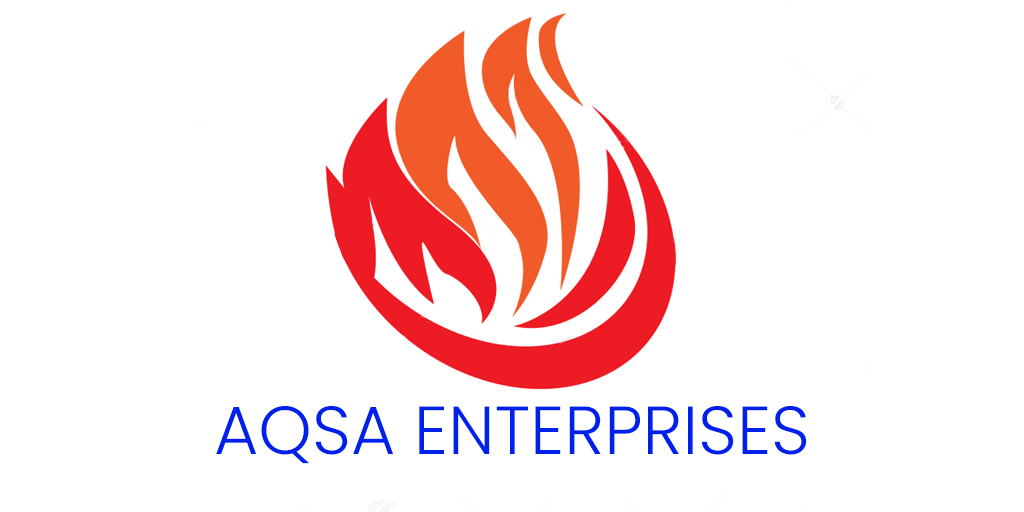
<style>
.page{position:relative;width:1024px;height:512px;background:#ffffff}
.page>*{position:absolute;margin:0}
.t1{font:68px "Poppins-Light";color:#0021eb}
</style>
<div class="page">
<p class="t1" style="left:216px;top:406px;width:591px;height:58px">AQSA ENTERPRISES</p>
</div>
